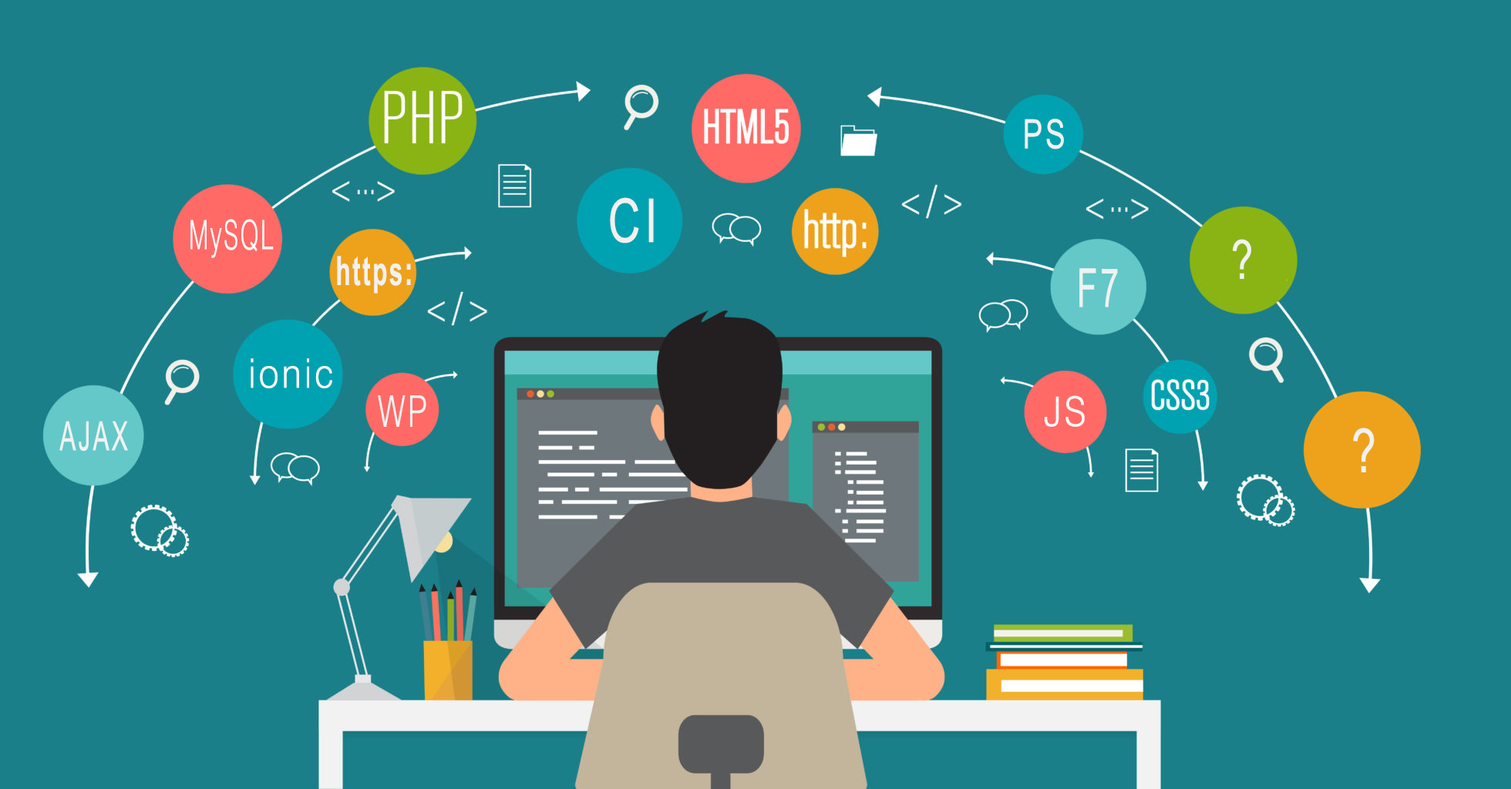
<style>
.page{position:relative;width:1511px;height:789px;background:#1a7f89}
.page>*{position:absolute;margin:0}
.t1{font:40.5px "ArialNarrow";letter-spacing:0.08em;color:#f1f1f1;scale:0.9 1}
.t2{font:60.7px "ArialNarrow";letter-spacing:0.08em;color:#f1f1f1;scale:0.9 1}
.t3{font:40.5px "Swiss721BT-Light";letter-spacing:0.08em;color:#ffffff;scale:0.6 1}
.t4{font:54px "ArialNarrow";letter-spacing:0.08em;color:#f1f1f1;scale:0.9 1}
.t5{font:40.5px "Arial-BoldMT";letter-spacing:0.08em;color:#f1f1f1;scale:0.6 1}
.t6{font:54px "ArialNarrow";letter-spacing:0.08em;color:#f1f1f1;scale:0.75 1}
.t7{font:40.5px "Swiss721BT-Light";letter-spacing:0.08em;color:#ffffff;scale:0.9 1}
.t8{font:43.8px "Swiss721BT-Light";letter-spacing:0.08em;color:#f1f1f1;scale:0.73 1}
.t9{font:40.5px "ArialNarrow";letter-spacing:0.08em;color:#f1f1f1;scale:0.74 1}
</style>
<div class="page">
<p class="t1" style="left:1024px;top:119px;width:40px;height:31px">PS</p>
<p class="t2" style="left:610px;top:197px;width:44px;height:47px">CI</p>
<p class="t3" style="left:190px;top:219px;width:84px;height:39px">MySQL</p>
<p class="t4" style="left:1233px;top:239px;width:18px;height:40px">?</p>
<p class="t5" style="left:337px;top:256px;width:74px;height:38px">https:</p>
<p class="t6" style="left:1079px;top:268px;width:39px;height:40px">F7</p>
<p class="t7" style="left:251px;top:358px;width:81px;height:30px">ionic</p>
<p class="t8" style="left:378px;top:395px;width:48px;height:32px">WP</p>
<p class="t7" style="left:1044px;top:395px;width:41px;height:32px">JS</p>
<p class="t9" style="left:59px;top:421px;width:69px;height:31px">AJAX</p>
<p class="t2" style="left:1353px;top:428px;width:21px;height:44px">?</p>
</div>
